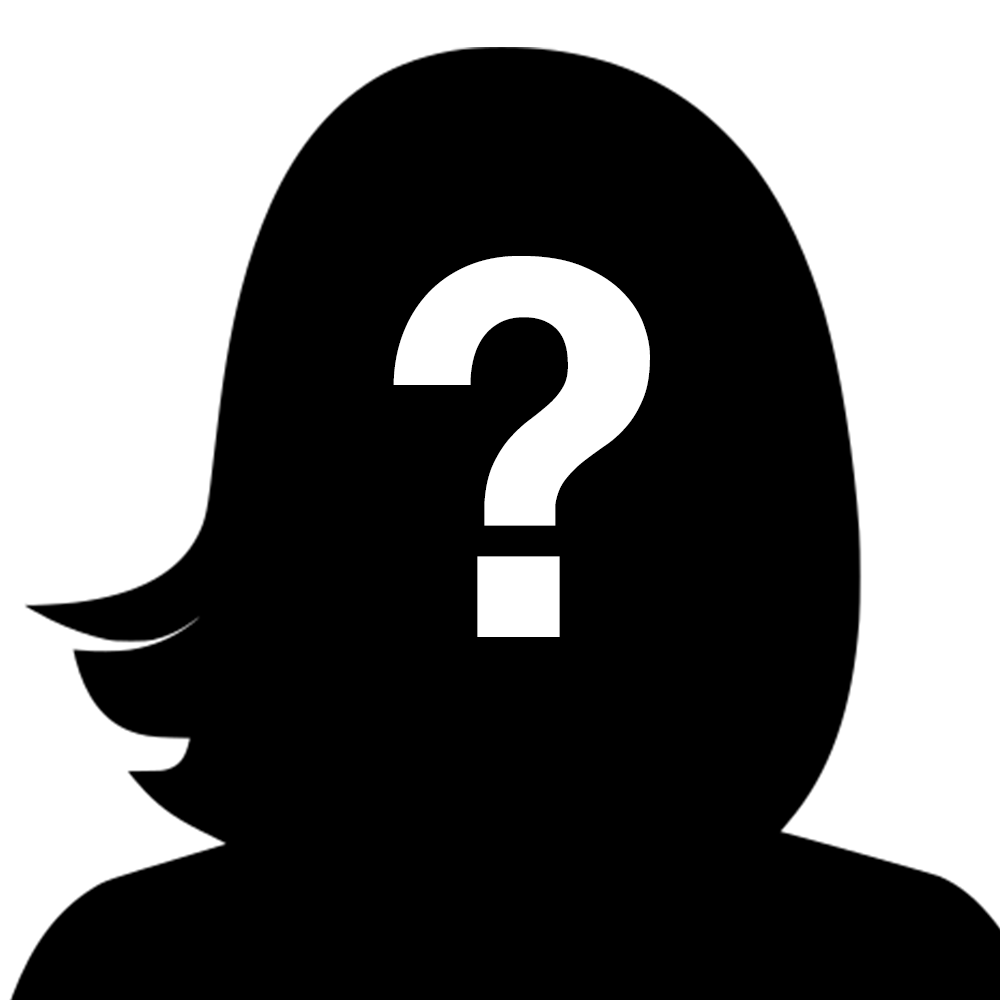
<style>
.page{position:relative;width:1000px;height:1000px;background:#000000}
.page>*{position:absolute;margin:0}
.t1{font:520.8px "HelveticaNeue-Bold";color:#ffffff}
</style>
<div class="page">
<p class="t1" style="left:393px;top:256px;width:257px;height:381px">?</p>
</div>
